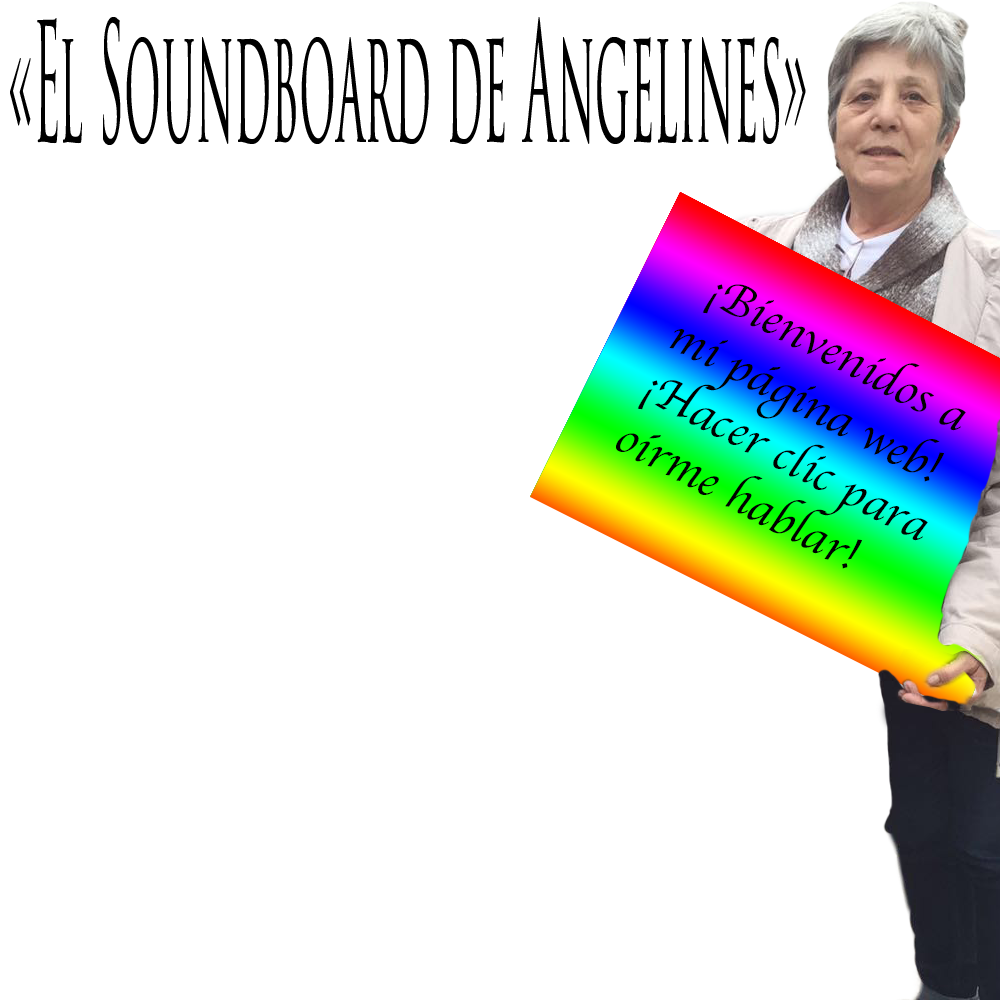
<style>
.page{position:relative;width:1000px;height:1000px;background:#ffffff}
.page>*{position:absolute;margin:0}
.t1{font:162.4px "TrajanPro3-Regular";color:#000000;scale:0.28 1}
.t2{font:48px "Apple-Chancery";color:#000000}
</style>
<div class="page">
<p class="t1" style="left:10px;top:17px;width:796px;height:128px">«El Soundboard de Angelines»</p>
<p class="t2" style="left:616px;top:284px;width:350px;height:285px;rotate:28deg">¡Bienvenidos a<br>mi página web!<br>¡Hacer clic para<br>oírme hablar!</p>
</div>
